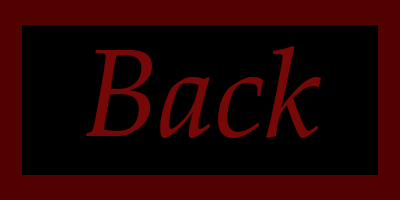
<style>
.page{position:relative;width:400px;height:200px;background:#000000}
.page>*{position:absolute;margin:0}
.t1{font:125px "PalatinoLinotype-Italic";color:#760808}
</style>
<div class="page">
<p class="t1" style="left:86px;top:46px;width:235px;height:92px">Back</p>
</div>
